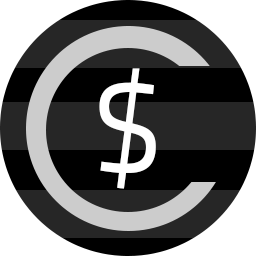
<style>
.page{position:relative;width:256px;height:256px;background:#262626}
.page>*{position:absolute;margin:0}
.t1{font:130px "TitilliumText22L-Regular";color:#ffffff}
</style>
<div class="page">
<p class="t1" style="left:99px;top:68px;width:57px;height:121px">$</p>
</div>
